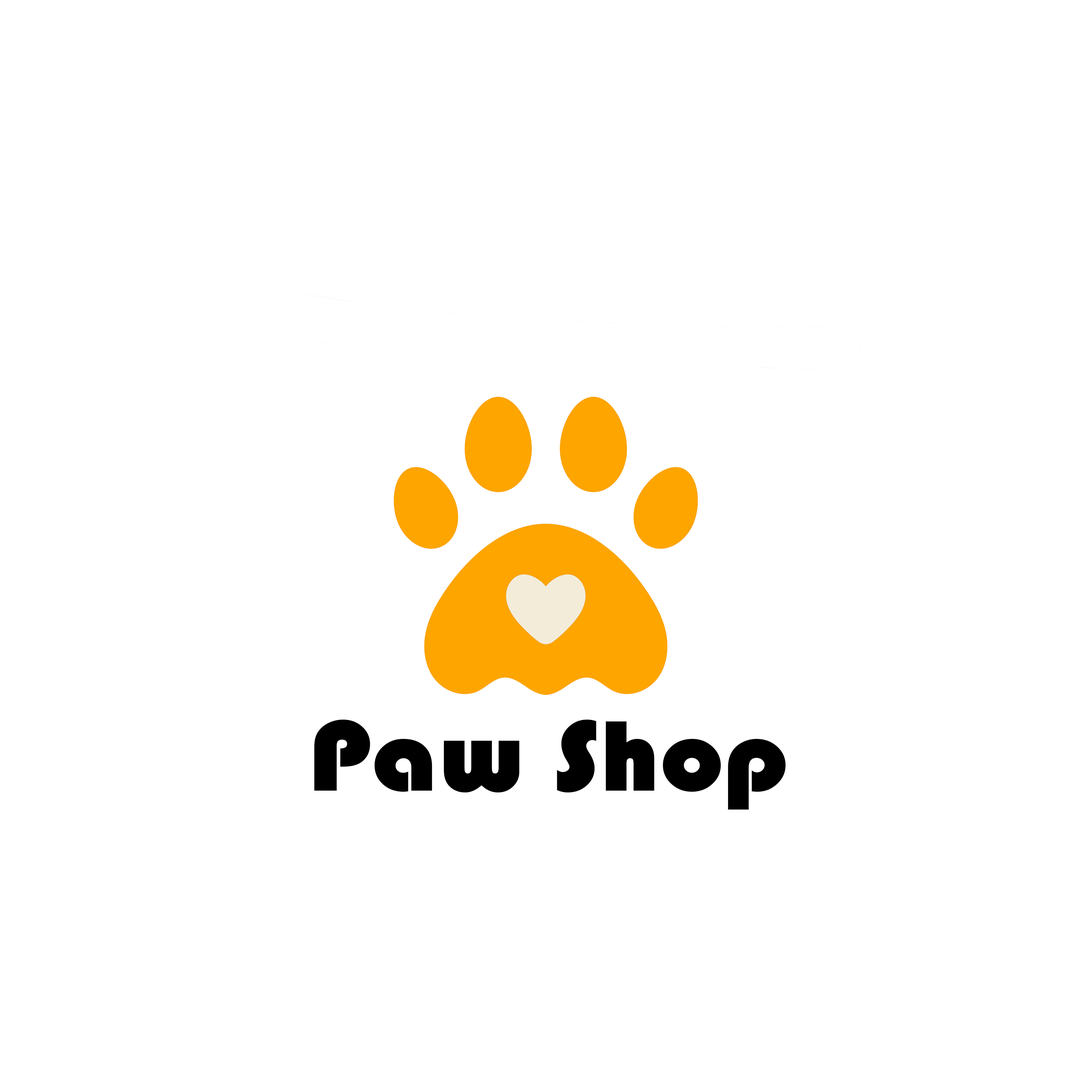
<style>
.page{position:relative;width:1092px;height:1092px;background:#ffffff}
.page>*{position:absolute;margin:0}
.t1{font:103.6px "Bauhaus93";color:#000000;scale:1.09 1}
</style>
<div class="page">
<p class="t1" style="left:314px;top:720px;width:472px;height:90px">Paw Shop</p>
</div>
